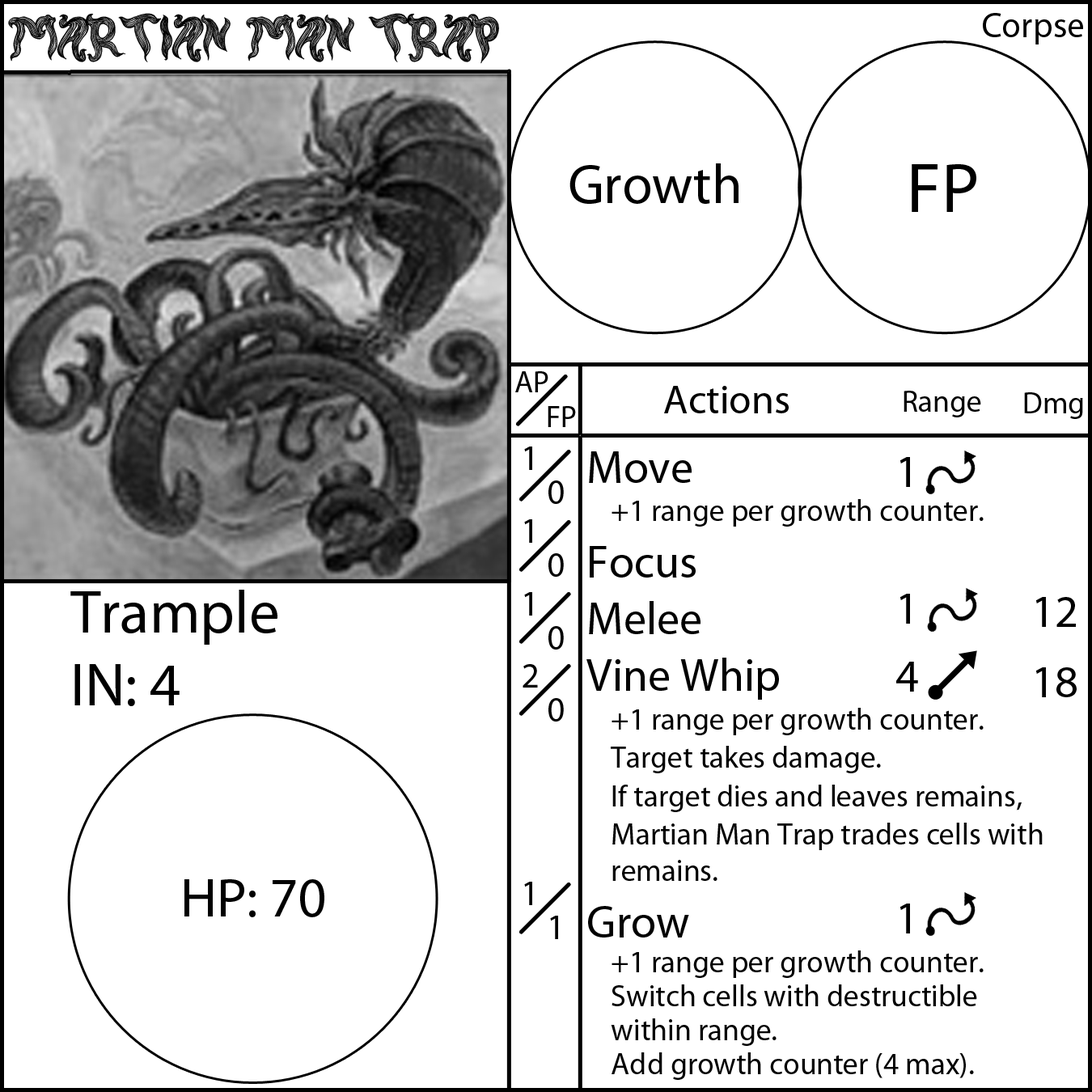
<style>
.page{position:relative;width:1092px;height:1092px;background:#ffffff}
.page>*{position:absolute;margin:0}
.t1{font:60.7px "rambutkusut";color:#000000}
.t2{font:55.6px "MyriadPro-Regular";color:#000000}
.t3{font:70.8px "MyriadPro-Regular";color:#000000}
.t4{font:30.3px "MyriadPro-Regular";color:#000000}
.t5{font:40.4px "MyriadPro-Regular";color:#000000}
.t6{font:35.4px "MyriadPro-Regular";color:#000000}
.t7{font:45.5px "MyriadPro-Regular";color:#000000}
.t8{font:60.7px "MyriadPro-Regular";color:#000000}
</style>
<div class="page">
<p class="t1" style="left:8px;top:13px;width:491px;height:51px">Martian Man Trap</p>
<p class="t2" style="left:569px;top:163px;width:170px;height:41px">Growth</p>
<p class="t3" style="left:912px;top:164px;width:64px;height:48px">FP</p>
<p class="t4" style="left:515px;top:371px;width:33px;height:21px">AP</p>
<p class="t5" style="left:664px;top:386px;width:125px;height:27px">Actions</p>
<p class="t4" style="left:904px;top:391px;width:77px;height:26px">Range</p>
<p class="t4" style="left:1024px;top:392px;width:59px;height:27px">Dmg</p>
<p class="t4" style="left:548px;top:406px;width:28px;height:21px">FP</p>
<p class="t6" style="left:523px;top:447px;width:15px;height:458px">1<br>1<br>1<br>2<br><br><br>1</p>
<p class="t4" style="left:586px;top:451px;width:457px;height:629px"><span class="t7">Move<br></span> +1 range per growth counter.<br><span class="t7">Focus<br>Melee<br>Vine Whip<br></span> +1 range per growth counter.<br> Target takes damage.<br> If target dies and leaves remains,<br> Martian Man Trap trades cells with    remains.<br><span class="t7">Grow<br></span> +1 range per growth counter.<br> Switch cells with destructible<br> within range.<br> Add growth counter (4 max).</p>
<p class="t7" style="left:896px;top:457px;width:22px;height:476px;text-align:center">1<br><br>1<br>4<br><br> <br>1</p>
<p class="t6" style="left:548px;top:480px;width:16px;height:459px">0<br>0<br>0<br>0<br><br><br>1</p>
<p class="t8" style="left:70px;top:590px;width:207px;height:116px">Trample<br>IN: 4</p>
<p class="t7" style="left:1035px;top:597px;width:42px;height:100px;text-align:center">12<br>18</p>
<p class="t2" style="left:184px;top:879px;width:140px;height:38px">HP: 70</p>
</div>
